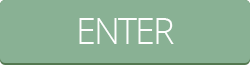
<style>
.page{position:relative;width:250px;height:65px;background:#89b194}
.page>*{position:absolute;margin:0}
.t1{font:36px "OpenSans-Light";letter-spacing:-0.048em;color:#fefefe;font-variant:small-caps}
</style>
<div class="page">
<p class="t1" style="left:79px;top:18px;width:95px;height:26px">ENTER</p>
</div>
